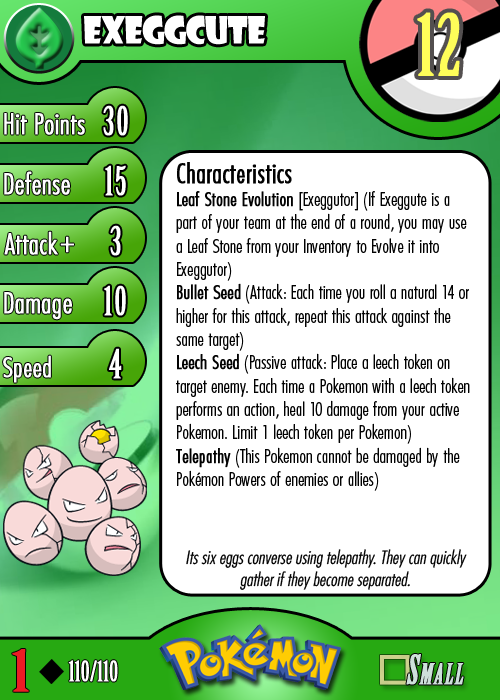
<style>
.page{position:relative;width:500px;height:700px;background:#ffffff}
.page>*{position:absolute;margin:0}
.t1{font:36.7px "ShowcardGothic-Reg";letter-spacing:-0.025em;color:#ffffff;scale:0.91 1}
.t2{font:83.3px "BirchStd";letter-spacing:0.025em;color:#fffd59;font-weight:bold}
.t3{font:27.8px "Futura-CondensedLight";color:#ffffff;font-weight:bold}
.t4{font:38.9px "BirchStd";letter-spacing:0.035em;color:#ffffff;font-weight:bold}
.t5{font:19.4px "FuturaCondensedBQ-Light";color:#010101}
.t6{font:27.8px "FuturaCondensedBQ-Light";color:#010101;font-weight:bold}
.t7{font:19.4px "FuturaCondensedBQ-Light";color:#010101;font-weight:bold}
.t8{font:30.6px "Futura-CondensedLight";color:#ffffff;font-weight:bold}
.t9{font:27.8px "FuturaCondensedBQ-Light";color:#ffffff;font-weight:bold}
.t10{font:18.1px "Futura-CondensedLight";color:#010101;font-style:italic}
.t11{font:55.6px "BirchStd";color:#ed1c24;font-weight:bold;scale:1.5 1}
.t12{font:27.8px "BirchStd";color:#ffffff;font-weight:bold}
</style>
<div class="page">
<p class="t1" style="left:84px;top:15px;width:181px;height:30px">exeggcute</p>
<p class="t2" style="left:417px;top:12px;width:43px;height:64px">12</p>
<p class="t3" style="left:4px;top:113px;width:81px;height:22px">Hit Points</p>
<p class="t4" style="left:103px;top:105px;width:25px;height:31px">30</p>
<p class="t3" style="left:4px;top:171px;width:66px;height:24px">Defense</p>
<p class="t4" style="left:105px;top:165px;width:21px;height:31px">15</p>
<p class="t5" style="left:176px;top:162px;width:294px;height:329px"><span class="t6">Characteristics<br></span><span class="t7">Leaf Stone Evolution </span>[Exeggutor] (If Exeggute is a part of your team at the end of a round, you may use a Leaf Stone from your Inventory to Evolve it into Exeggutor)<br><span class="t7">Bullet Seed</span> (Attack: Each time you roll a natural 14 or higher for this attack, repeat this attack against the same target)<br><span class="t7">Leech Seed</span> (Passive attack: Place a leech token on target enemy. Each time a Pokemon with a leech token performs an action, heal 10 damage from your active Pokemon. Limit 1 leech token per Pokemon)<br><span class="t7">Telepathy</span> (This Pokemon cannot be damaged by the Pokémon Powers of enemies or allies)</p>
<p class="t3" style="left:4px;top:231px;width:54px;height:24px">Attack</p>
<p class="t4" style="left:110px;top:225px;width:11px;height:31px">3</p>
<p class="t8" style="left:60px;top:236px;width:14px;height:17px">+</p>
<p class="t3" style="left:4px;top:292px;width:68px;height:28px">Damage</p>
<p class="t4" style="left:104px;top:285px;width:22px;height:31px">10</p>
<p class="t4" style="left:109px;top:348px;width:13px;height:31px">4</p>
<p class="t9" style="left:3px;top:355px;width:48px;height:28px">Speed</p>
<p class="t10" style="left:186px;top:549px;width:281px;height:41px;text-align:center">Its six eggs converse using telepathy. They can quickly gather if they become separated.</p>
<p class="t11" style="left:12px;top:649px;width:17px;height:43px">1</p>
<p class="t12" style="left:68px;top:660px;width:50px;height:22px">110/110</p>
</div>
